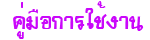
<style>
.page{position:relative;width:150px;height:40px;background:#ffffff}
.page>*{position:absolute;margin:0}
.t1{font:32px "DSNKatreeya";color:#ca07fb}
</style>
<div class="page">
<p class="t1" style="left:13px;top:1px;width:131px;height:38px">คู่มือการใช้งาน</p>
</div>
